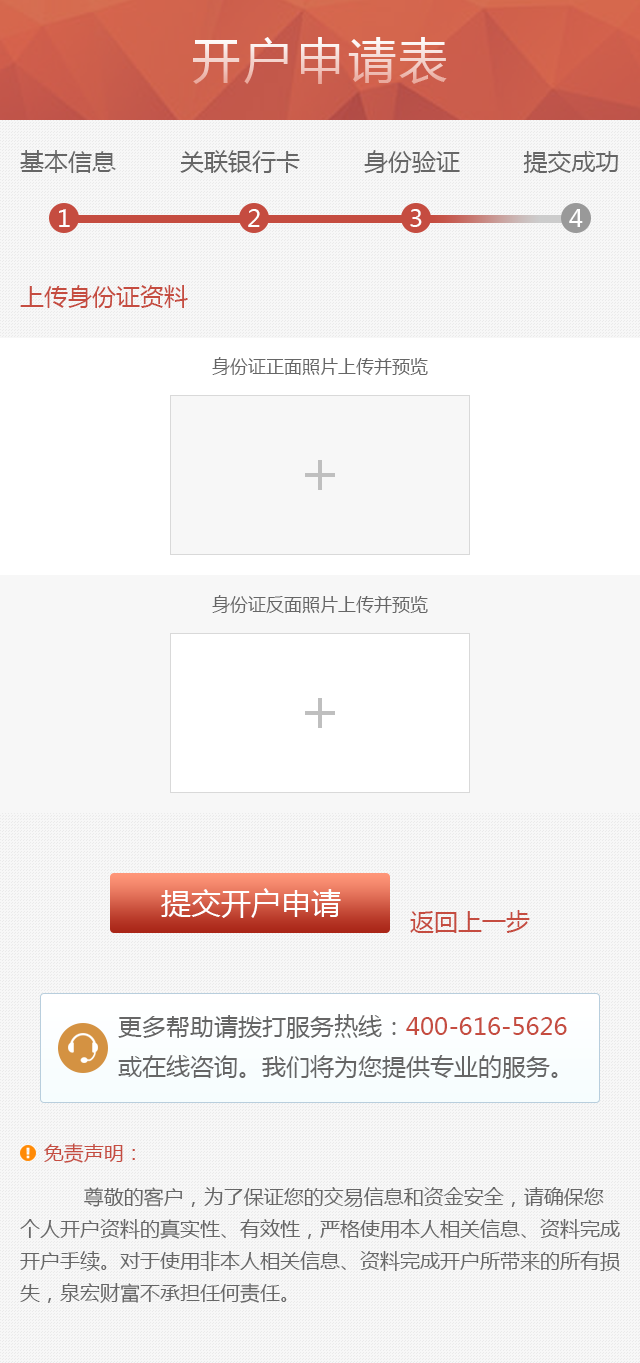
<style>
.page{position:relative;width:640px;height:1363px;background:#f7f7f7}
.page>*{position:absolute;margin:0}
.t1{font:48px "MicrosoftYaHei";letter-spacing:0.08em}
.t2{font:24px "MicrosoftYaHei";color:#666666}
.t3{font:24px "MicrosoftYaHei";letter-spacing:0.08em;color:#ffffff}
.t4{font:24px "MicrosoftYaHei";color:#c54c40}
.t5{font:18px "MicrosoftYaHei";color:#666666}
.t6{font:30px "MicrosoftYaHei";color:#ffffff}
.t7{font:24px/40px "MicrosoftYaHei";color:#666666}
.t8{font:24px/40px "MicrosoftYaHei";color:#c54c40}
.t9{font:20px/32px "MicrosoftYaHei";color:#666666}
.t10{font:20px/32px "MicrosoftYaHei";color:#c54c40}
.t11{font:20px/44px "MicrosoftYaHei";color:#c54c40}
</style>
<div class="page">
<p class="t1" style="left:193px;top:37px;width:254px;height:47px">开户申请表</p>
<p class="t2" style="left:20px;top:150px;width:598px;height:23px">基本信息         关联银行卡         身份验证         提交成功</p>
<p class="t3" style="left:59px;top:209px;width:11px;height:18px">1</p>
<p class="t3" style="left:248px;top:209px;width:12px;height:18px">2</p>
<p class="t3" style="left:410px;top:209px;width:12px;height:18px">3</p>
<p class="t3" style="left:569px;top:209px;width:14px;height:18px">4</p>
<p class="t4" style="left:20px;top:285px;width:168px;height:23px">上传身份证资料</p>
<p class="t5" style="left:212px;top:357px;width:216px;height:18px">身份证正面照片上传并预览</p>
<p class="t5" style="left:212px;top:595px;width:216px;height:18px">身份证反面照片上传并预览</p>
<p class="t6" style="left:161px;top:888px;width:180px;height:30px">提交开户申请</p>
<p class="t4" style="left:410px;top:910px;width:120px;height:23px">返回上一步</p>
<p class="t7" style="left:118px;top:1014px;width:449px;height:65px">更多帮助请拨打服务热线：<span class="t8">400-616-5626</span>或在线咨询。我们将为您提供专业的服务。</p>
<p class="t9" style="left:20px;top:1143px;width:600px;height:160px"><span class="t10">    </span><span class="t11">免责声明：<br>　　    </span>尊敬的客户，为了保证您的交易信息和资金安全，请确保您个人开户资料的真实性、有效性，严格使用本人相关信息、资料完成开户手续。对于使用非本人相关信息、资料完成开户所带来的所有损失，泉宏财富不承担任何责任。</p>
</div>
